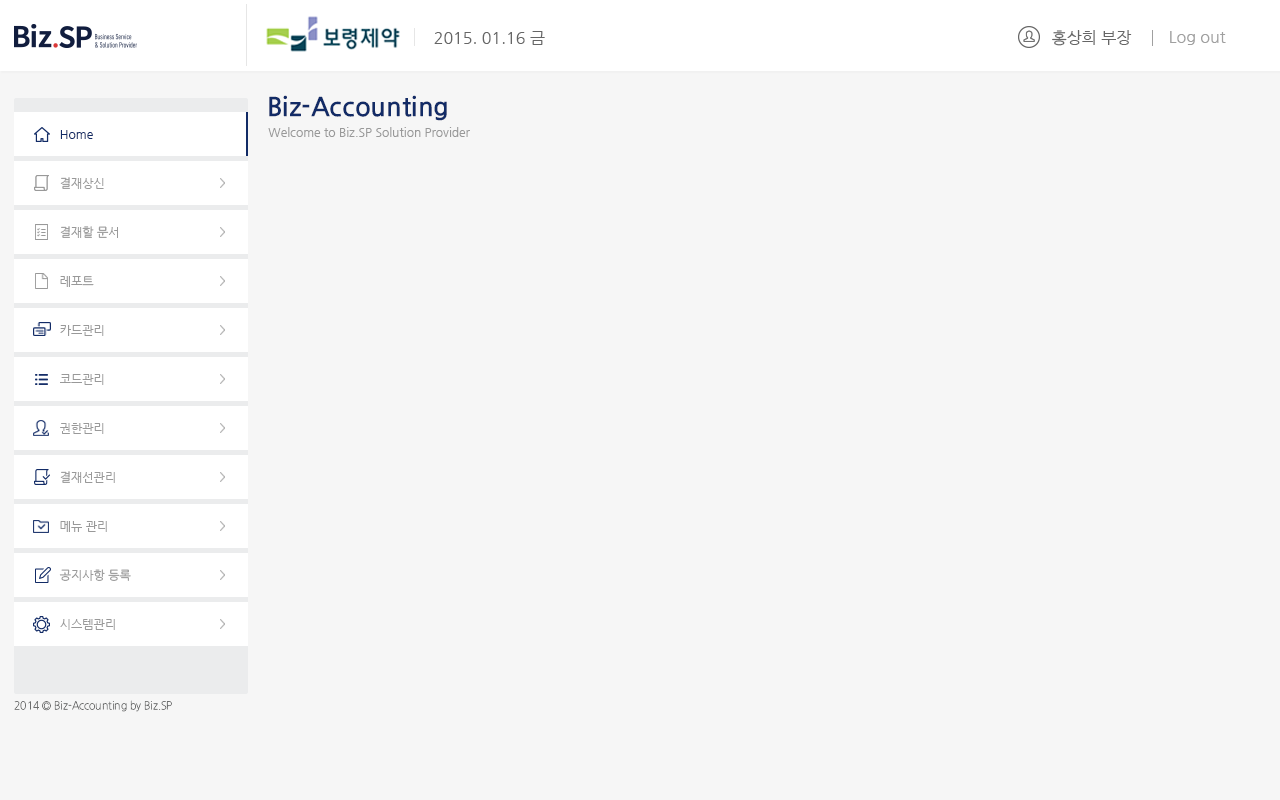
<style>
.page{position:relative;width:1280px;height:800px;background:#f6f6f6}
.page>*{position:absolute;margin:0}
.t1{font:16px "NanumGothic";color:#666666}
.t2{font:16px "NanumGothic";color:#a0a0a0}
.t3{font:26px "NanumGothicOTFBold";color:#122b66}
.t4{font:12px "NanumGothic";color:#122b66}
.t5{font:12px "NanumGothic";color:#999999}
.t6{font:12px "NanumGothic"}
.t7{font:11px "NanumGothicOTFLight";color:#6c6d6d;scale:0.94 1}
</style>
<div class="page">
<p class="t1" style="left:1052px;top:30px;width:80px;height:16px">홍상희 부장</p>
<p class="t1" style="left:434px;top:31px;width:111px;height:14px">2015. 01.16 금</p>
<p class="t2" style="left:1170px;top:31px;width:56px;height:14px">Log out</p>
<p class="t3" style="left:269px;top:95px;width:178px;height:26px">Biz-Accounting</p>
<p class="t4" style="left:60px;top:130px;width:33px;height:9px">Home</p>
<p class="t4" style="left:60px;top:130px;width:33px;height:9px">Home</p>
<p class="t5" style="left:268px;top:127px;width:202px;height:10px">Welcome to Biz.SP Solution Provider</p>
<p class="t6" style="left:60px;top:177px;width:48px;height:12px">결제 상신</p>
<p class="t5" style="left:60px;top:177px;width:44px;height:12px">결재상신</p>
<p class="t5" style="left:60px;top:226px;width:58px;height:12px">결제할 문서</p>
<p class="t5" style="left:60px;top:226px;width:58px;height:12px">결재할 문서</p>
<p class="t5" style="left:60px;top:276px;width:34px;height:11px">레포트</p>
<p class="t5" style="left:60px;top:276px;width:34px;height:11px">레포트</p>
<p class="t5" style="left:60px;top:276px;width:34px;height:11px">레포트</p>
<p class="t5" style="left:60px;top:276px;width:34px;height:11px">레포트</p>
<p class="t5" style="left:60px;top:276px;width:34px;height:11px">레포트</p>
<p class="t5" style="left:60px;top:276px;width:34px;height:11px">레포트</p>
<p class="t5" style="left:60px;top:276px;width:34px;height:11px">레포트</p>
<p class="t5" style="left:60px;top:276px;width:34px;height:11px">레포트</p>
<p class="t5" style="left:60px;top:325px;width:44px;height:11px">카드관리</p>
<p class="t5" style="left:60px;top:374px;width:44px;height:11px">코드관리</p>
<p class="t5" style="left:60px;top:423px;width:44px;height:11px">권한관리</p>
<p class="t5" style="left:60px;top:471px;width:55px;height:12px">결재선관리</p>
<p class="t5" style="left:60px;top:521px;width:47px;height:11px">메뉴 관리</p>
<p class="t5" style="left:59px;top:569px;width:72px;height:12px">공지사항 등록</p>
<p class="t5" style="left:60px;top:619px;width:55px;height:11px">시스템관리</p>
<p class="t7" style="left:14px;top:700px;width:158px;height:12px">2014 © Biz-Accounting by Biz.SP</p>
</div>
